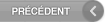
<style>
.page{position:relative;width:105px;height:22px;background:#9c9c9c}
.page>*{position:absolute;margin:0}
.t1{font:10px "Helvetica-Bold";letter-spacing:-0.04em;color:#ffffff}
</style>
<div class="page">
<p class="t1" style="left:12px;top:5px;width:58px;height:10px">PRÉCÉDENT</p>
</div>
